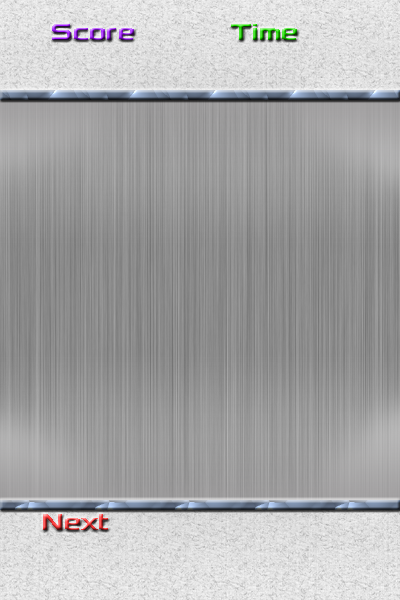
<style>
.page{position:relative;width:400px;height:600px}
.page>*{position:absolute;margin:0}
.t1{font:24px "Xolonium-Bold"}
</style>
<div class="page">
<p class="t1" style="left:52px;top:24px;width:82px;height:16px">Score</p>
<p class="t1" style="left:231px;top:24px;width:66px;height:16px">Time</p>
<p class="t1" style="left:43px;top:514px;width:65px;height:16px">Next</p>
</div>
